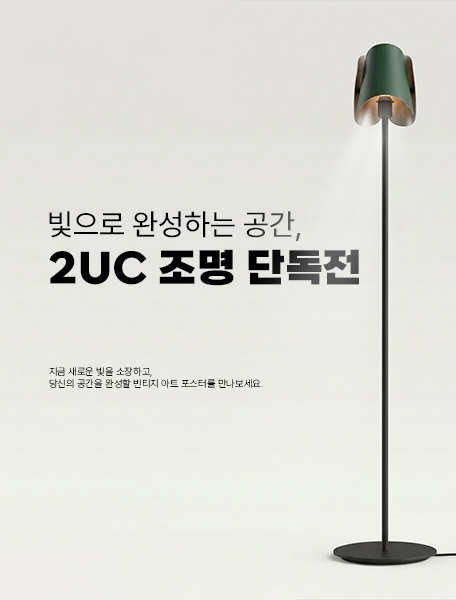
<style>
.page{position:relative;width:456px;height:600px}
.page>*{position:absolute;margin:0}
.t1{font:30px "Pretendard-Regular";color:#000000}
.t2{font:40px "SBAggroB";color:#000000}
.t3{font:10px "Pretendard-Thin";color:#000000}
</style>
<div class="page">
<p class="t1" style="left:49px;top:211px;width:252px;height:30px">빛으로 완성하는 공간,</p>
<p class="t2" style="left:49px;top:249px;width:310px;height:37px">2UC 조명 단독전</p>
<p class="t3" style="left:49px;top:367px;width:214px;height:21px">지금 새로운 빛을 소장하고, <br>당신의 공간을 완성할 빈티지 아트 포스터를 만나보세요.</p>
</div>
